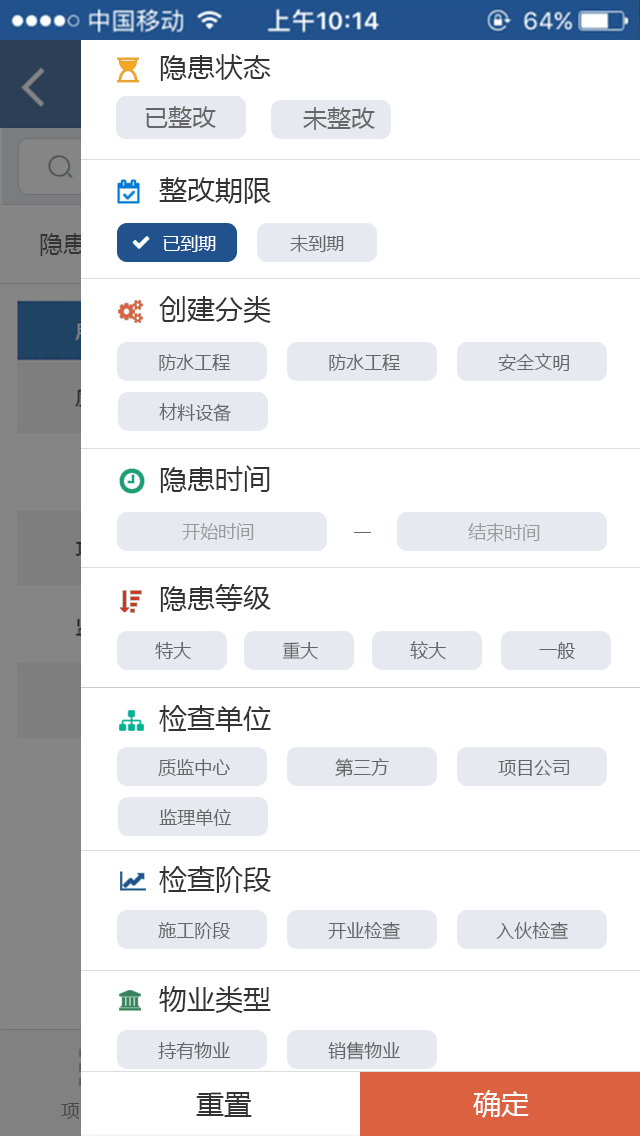
<style>
.page{position:relative;width:640px;height:1136px;background:#ffffff}
.page>*{position:absolute;margin:0}
.t1{font:28px "MicrosoftYaHei";color:#333333}
.t2{font:24px "MicrosoftYaHei";color:#666666}
.t3{font:24px "MicrosoftYaHei"}
.t4{font:18px "MicrosoftYaHei";color:#ffffff}
.t5{font:18px "MicrosoftYaHei";color:#666666}
.t6{font:18px "MicrosoftYaHei";color:#999999}
.t7{font:28px "MicrosoftYaHei";color:#ffffff}
</style>
<div class="page">
<p class="t1" style="left:160px;top:54px;width:111px;height:27px">隐患状态</p>
<p class="t2" style="left:145px;top:106px;width:71px;height:22px">已整改</p>
<p class="t2" style="left:303px;top:107px;width:72px;height:23px">未整改</p>
<p class="t1" style="left:159px;top:177px;width:112px;height:27px">整改期限</p>
<p class="t3" style="left:40px;top:232px;width:95px;height:24px">隐患状态</p>
<p class="t4" style="left:163px;top:235px;width:53px;height:17px">已到期</p>
<p class="t5" style="left:290px;top:235px;width:54px;height:17px">未到期</p>
<p class="t1" style="left:159px;top:296px;width:112px;height:27px">创建分类</p>
<p class="t5" style="left:498px;top:353px;width:71px;height:18px">安全文明</p>
<p class="t5" style="left:159px;top:354px;width:72px;height:17px">防水工程</p>
<p class="t5" style="left:329px;top:354px;width:72px;height:17px">防水工程</p>
<p class="t5" style="left:159px;top:403px;width:72px;height:19px">材料设备</p>
<p class="t1" style="left:160px;top:465px;width:110px;height:28px">隐患时间</p>
<p class="t6" style="left:182px;top:523px;width:72px;height:17px">开始时间</p>
<p class="t6" style="left:468px;top:523px;width:72px;height:19px">结束时间</p>
<p class="t1" style="left:160px;top:584px;width:111px;height:28px">隐患等级</p>
<p class="t5" style="left:410px;top:641px;width:37px;height:18px">较大</p>
<p class="t5" style="left:155px;top:642px;width:37px;height:17px">特大</p>
<p class="t5" style="left:282px;top:642px;width:37px;height:17px">重大</p>
<p class="t5" style="left:539px;top:642px;width:36px;height:17px">一般</p>
<p class="t1" style="left:159px;top:705px;width:112px;height:27px">检查单位</p>
<p class="t5" style="left:158px;top:759px;width:72px;height:17px">质监中心</p>
<p class="t5" style="left:335px;top:758px;width:54px;height:19px">第三方</p>
<p class="t5" style="left:498px;top:760px;width:71px;height:16px">项目公司</p>
<p class="t5" style="left:159px;top:809px;width:73px;height:17px">监理单位</p>
<p class="t1" style="left:159px;top:866px;width:112px;height:27px">检查阶段</p>
<p class="t5" style="left:158px;top:922px;width:73px;height:17px">施工阶段</p>
<p class="t5" style="left:328px;top:921px;width:72px;height:18px">开业检查</p>
<p class="t5" style="left:496px;top:921px;width:72px;height:18px">入伙检查</p>
<p class="t1" style="left:159px;top:986px;width:112px;height:27px">物业类型</p>
<p class="t5" style="left:158px;top:1042px;width:72px;height:17px">持有物业</p>
<p class="t5" style="left:328px;top:1041px;width:72px;height:19px">销售物业</p>
<p class="t1" style="left:196px;top:1092px;width:56px;height:25px">重置</p>
<p class="t7" style="left:473px;top:1090px;width:56px;height:28px">确定</p>
</div>
